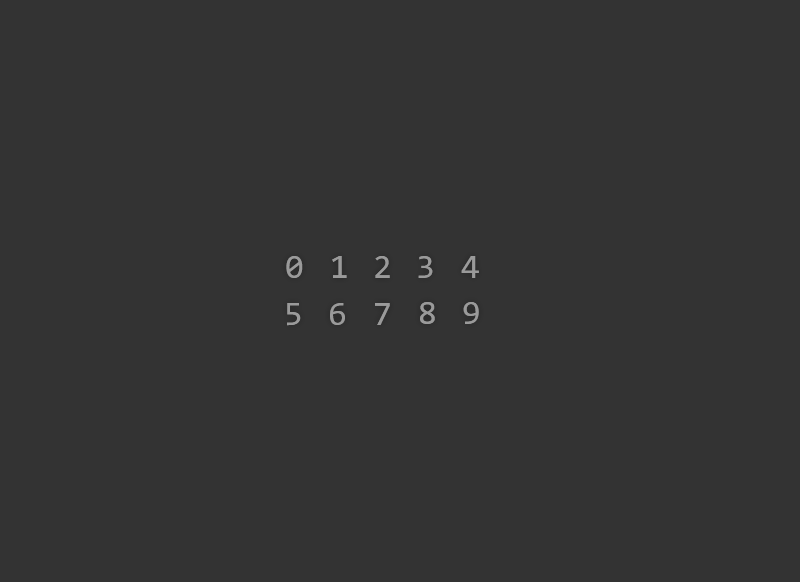
<style>
.page{position:relative;width:800px;height:582px;background:#333333}
.page>*{position:absolute;margin:0}
.t1{font:34px "Consolas";color:#9a9a9a}
</style>
<div class="page">
<p class="t1" style="left:286px;top:256px;width:17px;height:22px">0</p>
<p class="t1" style="left:332px;top:256px;width:15px;height:22px">1</p>
<p class="t1" style="left:375px;top:256px;width:15px;height:22px">2</p>
<p class="t1" style="left:418px;top:256px;width:15px;height:22px">3</p>
<p class="t1" style="left:461px;top:256px;width:18px;height:22px">4</p>
<p class="t1" style="left:287px;top:303px;width:14px;height:23px">5</p>
<p class="t1" style="left:330px;top:303px;width:15px;height:22px">6</p>
<p class="t1" style="left:375px;top:303px;width:15px;height:22px">7</p>
<p class="t1" style="left:420px;top:302px;width:15px;height:22px">8</p>
<p class="t1" style="left:463px;top:302px;width:16px;height:22px">9</p>
</div>
